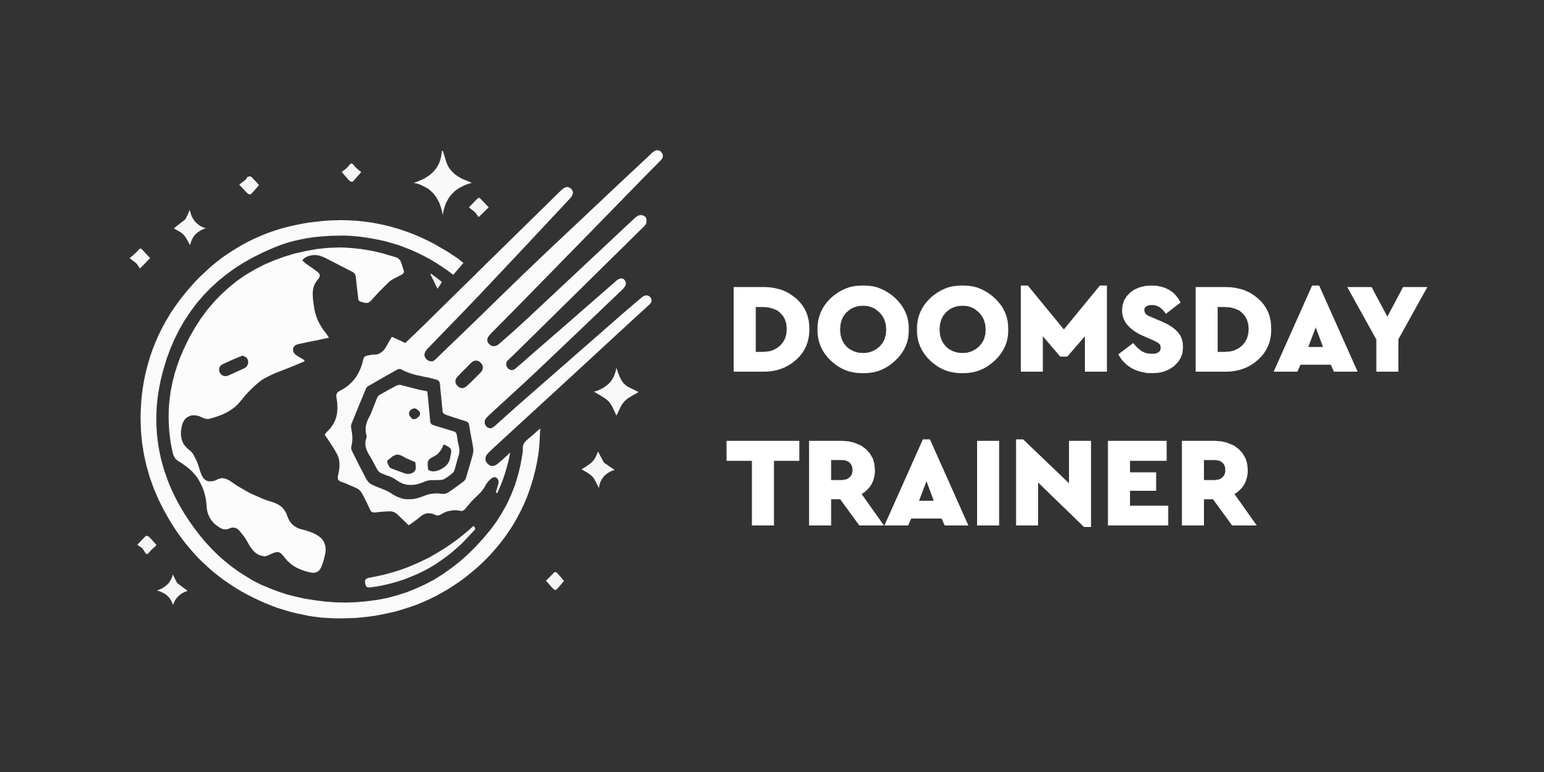
<style>
.page{position:relative;width:1544px;height:772px;background:#333333}
.page>*{position:absolute;margin:0}
.t1{font:128.2px "CeraPro-Black";color:#ffffff}
</style>
<div class="page">
<p class="t1" style="left:726px;top:285px;width:702px;height:243px">DOOMSDAY<br>TRAINER</p>
</div>
